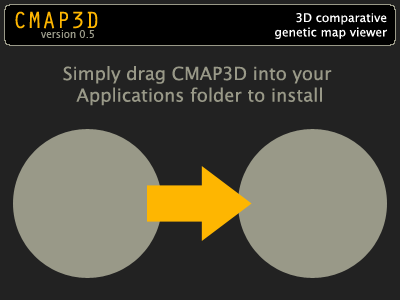
<style>
.page{position:relative;width:400px;height:300px;background:#222222}
.page>*{position:absolute;margin:0}
.t1{font:24px "OratorStd";color:#feb601}
.t2{font:12px "LucidaGrande";color:#ffffff}
.t3{font:10px "LucidaGrande";color:#999988}
.t4{font:18px "LucidaGrande";color:#999988}
</style>
<div class="page">
<p class="t1" style="left:15px;top:11px;width:83px;height:18px">CMAP3D</p>
<p class="t2" style="left:275px;top:13px;width:112px;height:26px;text-align:right">3D comparative<br>genetic map viewer</p>
<p class="t3" style="left:41px;top:30px;width:53px;height:8px">version 0.5</p>
<p class="t4" style="left:63px;top:66px;width:269px;height:40px;text-align:center">Simply drag CMAP3D into your <br>Applications folder to install</p>
</div>
